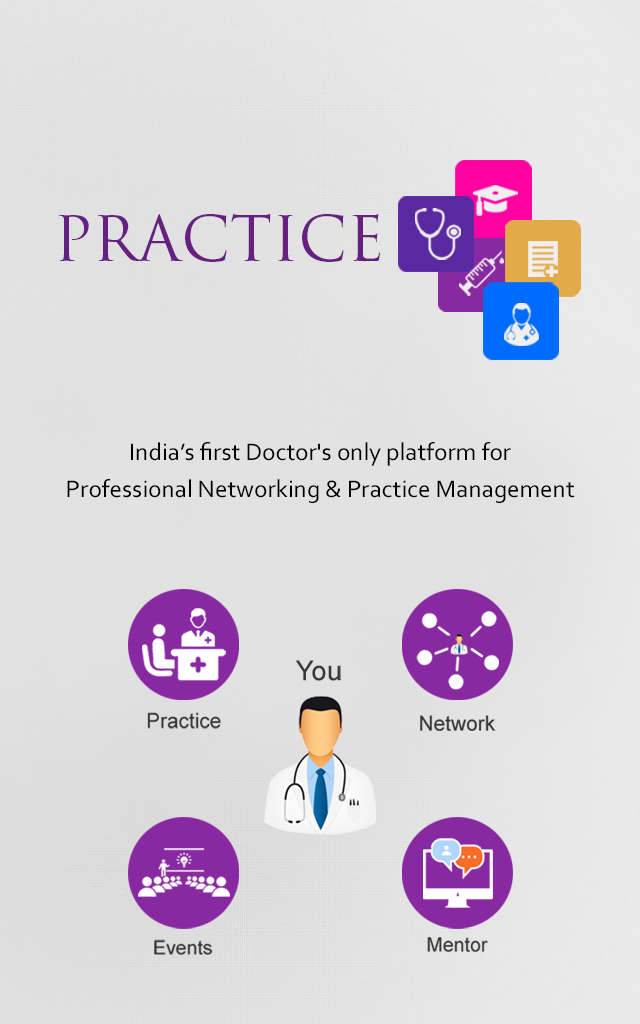
<style>
.page{position:relative;width:640px;height:1024px}
.page>*{position:absolute;margin:0}
.t1{font:61.3px "TrajanPro-Regular";color:#662080}
.t2{font:25px/37.5px "Corbel";color:#000000}
</style>
<div class="page">
<p class="t1" style="left:58px;top:214px;width:322px;height:48px">PRACTICE</p>
<p class="t2" style="left:67px;top:442px;width:508px;height:61px;text-align:center">India’s first Doctor's only platform for <br>Professional Networking &amp; Practice Management</p>
</div>
